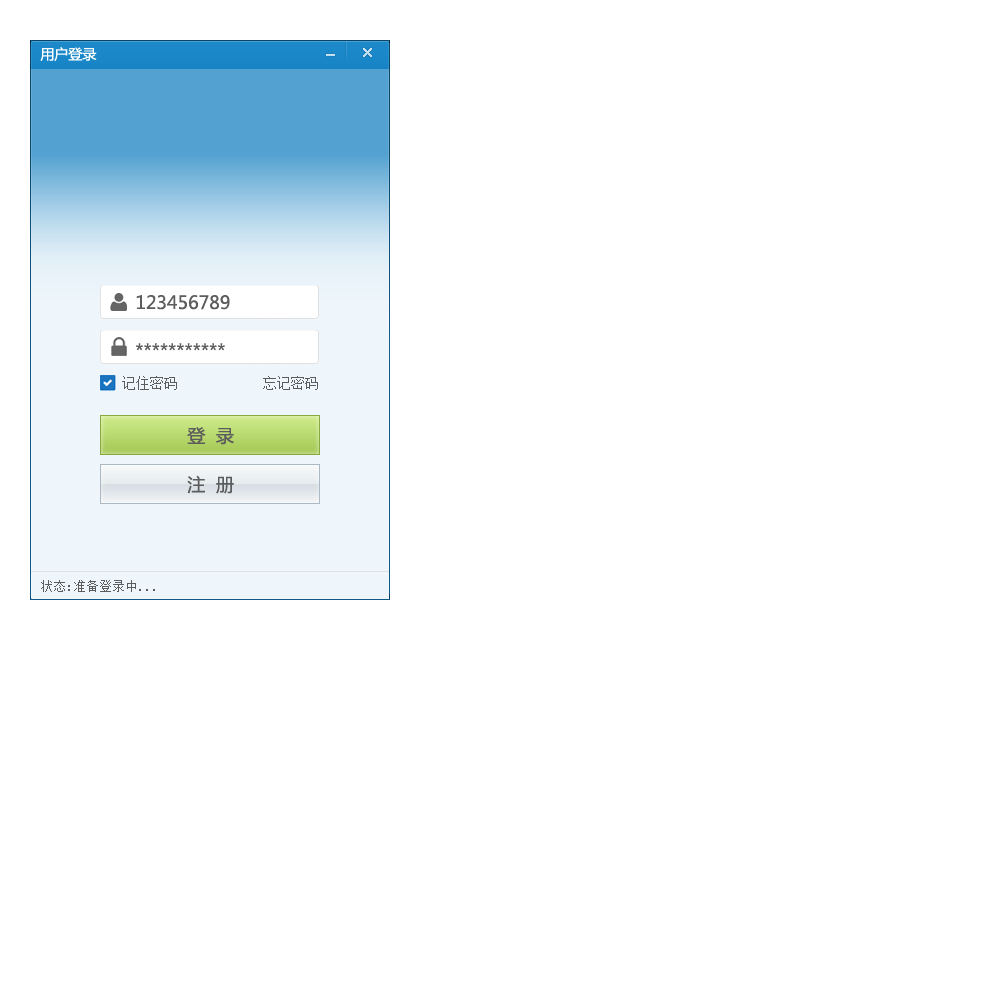
<style>
.page{position:relative;width:1000px;height:1000px;background:#ffffff}
.page>*{position:absolute;margin:0}
.t1{font:14px "MicrosoftYaHei";color:#ffffff}
.t2{font:18px "MicrosoftYaHei";color:#5c5c5c}
.t3{font:14px "SimSun";color:#5c5c5c}
.t4{font:13px "SimSun";color:#5c5c5c}
</style>
<div class="page">
<p class="t1" style="left:40px;top:47px;width:57px;height:14px">用户登录</p>
<p class="t2" style="left:136px;top:295px;width:94px;height:15px">123456789</p>
<p class="t2" style="left:136px;top:343px;width:89px;height:8px">***********</p>
<p class="t3" style="left:122px;top:376px;width:55px;height:14px">记住密码</p>
<p class="t3" style="left:263px;top:376px;width:55px;height:14px">忘记密码</p>
<p class="t2" style="left:187px;top:427px;width:47px;height:18px">登  录</p>
<p class="t2" style="left:187px;top:475px;width:47px;height:19px">注  册</p>
<p class="t4" style="left:41px;top:580px;width:114px;height:12px">状态:准备登录中...</p>
</div>
